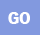
<style>
.page{position:relative;width:40px;height:35px;background:#8299df}
.page>*{position:absolute;margin:0}
.t1{font:27.6px "Arial-Black";letter-spacing:-0.05em;color:#ffffff;scale:0.9 1}
</style>
<div class="page">
<p class="t1" style="left:8px;top:12px;width:22px;height:12px">GO</p>
</div>
